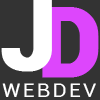
<style>
.page{position:relative;width:100px;height:100px;background:#333333}
.page>*{position:absolute;margin:0}
.t1{font:95.8px "Roboto-Black";letter-spacing:0.06em;color:#ffffff;text-transform:uppercase;font-weight:bold}
.t2{font:95.8px "Roboto-Black";letter-spacing:0.06em;color:#dd46fc;text-transform:uppercase;font-weight:bold}
.t3{font:18.7px "Roboto-Regular";letter-spacing:0.12em;color:#ffffff;text-transform:uppercase;scale:1.11 1}
</style>
<div class="page">
<p class="t1" style="left:1px;top:0px;width:51px;height:72px">J</p>
<p class="t2" style="left:42px;top:7px;width:57px;height:71px">D</p>
<p class="t3" style="left:2px;top:83px;width:94px;height:14px">WebDev</p>
</div>
